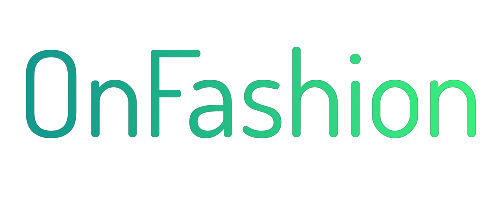
<style>
.page{position:relative;width:500px;height:200px;background:#ffffff}
.page>*{position:absolute;margin:0}
.t1{font:118.8px "Dosis-Regular"}
</style>
<div class="page">
<p class="t1" style="left:26px;top:47px;width:450px;height:91px">OnFashion</p>
</div>
